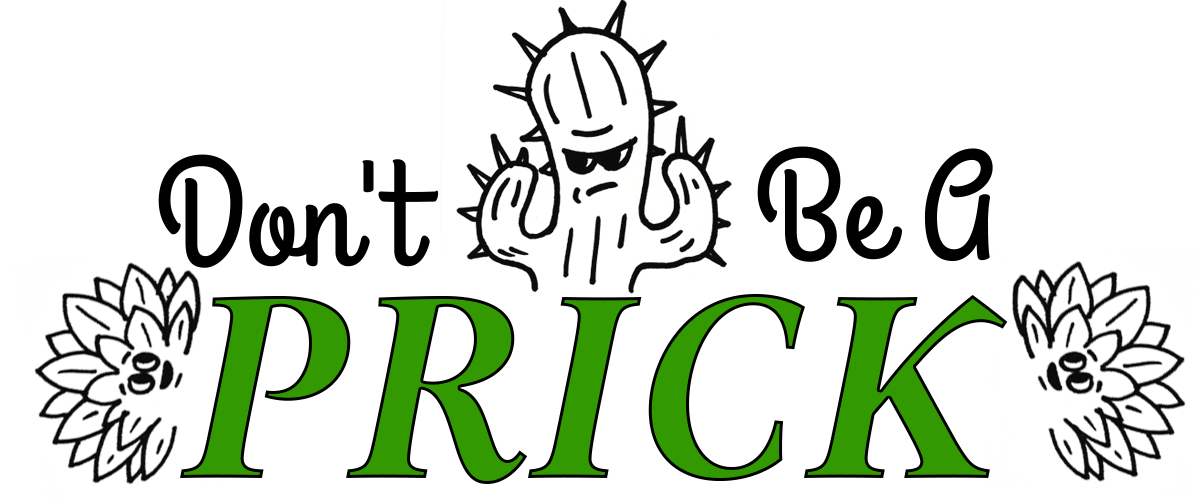
<style>
.page{position:relative;width:1200px;height:500px;background:#ffffff}
.page>*{position:absolute;margin:0}
.t1{font:150px "GrandHotel-Regular";color:#000000}
.t2{font:268px "AriaTextG2-BoldItalic";color:#339900}
</style>
<div class="page">
<p class="t1" style="left:757px;top:146px;width:236px;height:116px">Be A</p>
<p class="t1" style="left:158px;top:154px;width:281px;height:114px">Don't</p>
<p class="t2" style="left:180px;top:294px;width:828px;height:190px">PRICK</p>
</div>
